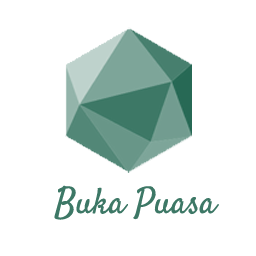
<style>
.page{position:relative;width:256px;height:256px;background:#ffffff}
.page>*{position:absolute;margin:0}
.t1{font:36px "Satisfy-Regular";color:#3d7866}
</style>
<div class="page">
<p class="t1" style="left:54px;top:185px;width:165px;height:35px">Buka Puasa</p>
</div>
